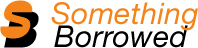
<style>
.page{position:relative;width:198px;height:48px;background:#ffffff}
.page>*{position:absolute;margin:0}
.t1{font:30px "HelveticaNeue-Italic";letter-spacing:0.01em;color:#f4841a}
.t2{font:30px "HelveticaNeue-Italic";letter-spacing:0.01em;color:#000000}
</style>
<div class="page">
<p class="t1" style="left:51px;top:2px;width:147px;height:29px">Something</p>
<p class="t2" style="left:54px;top:25px;width:134px;height:23px">Borrowed</p>
</div>
